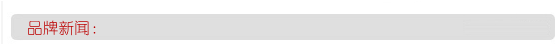
<style>
.page{position:relative;width:557px;height:46px;background:#ffffff}
.page>*{position:absolute;margin:0}
.t1{font:15.4px "YouYuan";letter-spacing:0.05em;color:#bc0000}
</style>
<div class="page">
<p class="t1" style="left:28px;top:20px;width:68px;height:16px">品牌新闻：</p>
</div>
